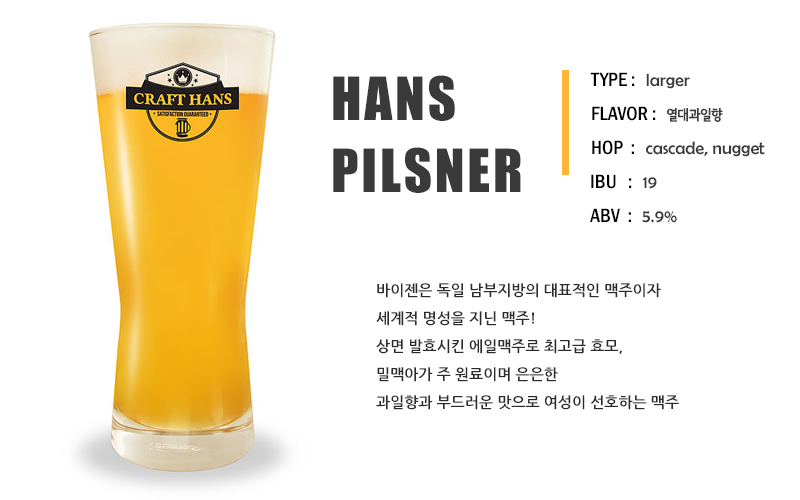
<style>
.page{position:relative;width:800px;height:500px;background:#ffffff}
.page>*{position:absolute;margin:0}
.t1{font:55px/72px "Impact";letter-spacing:0.05em;color:#3a3a3a}
.t2{font:20px "FranklinGothic-MediumCond";color:#000000}
.t3{font:18px "BerlinSansFB-Reg";color:#3a3a3a}
.t4{font:14px "SeN-CBL";color:#3a3a3a}
.t5{font:15px/28px "NanumGothicBold";color:#2b2b2b}
</style>
<div class="page">
<p class="t1" style="left:333px;top:75px;width:188px;height:118px">HANS<br>PILSNER</p>
<p class="t2" style="left:590px;top:72px;width:100px;height:17px">TYPE :  <span class="t3">larger</span></p>
<p class="t2" style="left:592px;top:106px;width:131px;height:16px">FLAVOR :  <span class="t4">열대과일향</span></p>
<p class="t3" style="left:592px;top:140px;width:173px;height:17px"><span class="t2">HOP  :  </span>cascade, nugget</p>
<p class="t2" style="left:591px;top:174px;width:66px;height:15px">IBU   :  <span class="t3">19</span></p>
<p class="t2" style="left:590px;top:208px;width:87px;height:15px">ABV  :  <span class="t3">5.9%</span></p>
<p class="t5" style="left:376px;top:283px;width:303px;height:127px">바이젠은 독일 남부지방의 대표적인 맥주이자 <br>세계적 명성을 지닌 맥주!<br>상면 발효시킨 에일맥주로 최고급 효모, <br>밀맥아가 주 원료이며 은은한<br>과일향과 부드러운 맛으로 여성이 선호하는 맥주</p>
</div>
